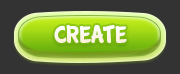
<style>
.page{position:relative;width:180px;height:74px;background:#333333}
.page>*{position:absolute;margin:0}
.t1{font:25px "Cartwheel";color:#ffffff}
</style>
<div class="page">
<p class="t1" style="left:54px;top:25px;width:73px;height:18px">CREATE</p>
</div>
